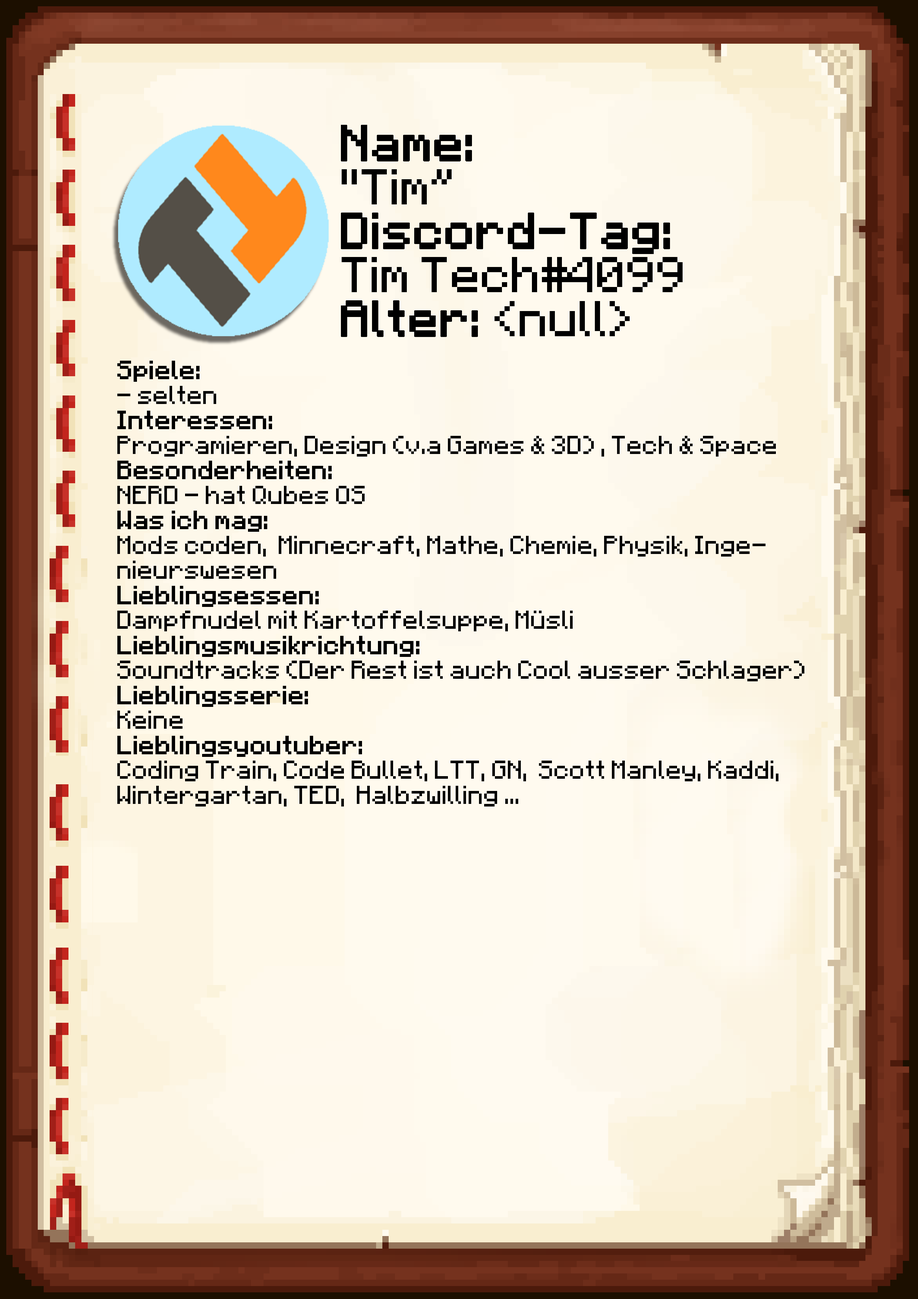
<style>
.page{position:relative;width:918px;height:1299px}
.page>*{position:absolute;margin:0}
.t1{font:40.1px/43.9px "Minecraft";color:#000000}
.t2{font:40.1px/43.9px "Minecraft";color:#000000;font-weight:bold}
.t3{font:20.8px "Minecraft";color:#000000}
.t4{font:20.8px "Minecraft";color:#000000;font-weight:bold}
</style>
<div class="page">
<p class="t1" style="left:341px;top:125px;width:342px;height:212px"><span class="t2">Name:<br></span>"Tim”<br><span class="t2">Discord-Tag:<br></span>Tim Tech#4099<br><span class="t2">Alter: </span>&lt;null&gt;</p>
<p class="t3" style="left:117px;top:361px;width:687px;height:445px"><span class="t4">Spiele: <br></span>- selten<br><span class="t4">Interessen:<br></span>Programieren, Design (v.a Games &amp; 3D) , Tech &amp; Space<br><span class="t4">Besonderheiten:</span><br>NERD - hat Qubes OS<br><span class="t4">Was ich mag:<br></span>Mods coden,  Minnecraft, Mathe, Chemie, Physik, Ingenieurswesen<br><span class="t4">Lieblingsessen:<br></span>Dampfnudel mit Kartoffelsuppe, Müsli<br><span class="t4">Lieblingsmusikrichtung:<br></span>Soundtracks (Der Rest ist auch Cool ausser Schlager)<br><span class="t4">Lieblingsserie:<br></span>Keine<br><span class="t4">Lieblingsyoutuber:<br></span>Coding Train, Code Bullet, LTT, GN,  Scott Manley, Kaddi, Wintergartan, TED,  Halbzwilling ...</p>
</div>
